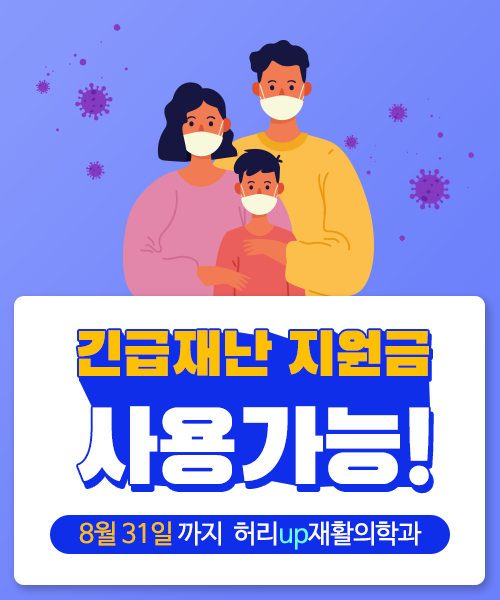
<style>
.page{position:relative;width:500px;height:600px;background:#ffffff}
.page>*{position:absolute;margin:0}
.t1{font:60px "BlackHanSans-Regular";letter-spacing:-0.025em;color:#ffc001}
.t2{font:102px "BlackHanSans-Regular";letter-spacing:-0.025em;color:#ffffff}
.t3{font:26px "NanumBarunGothic";letter-spacing:-0.025em;color:#ffc001}
.t4{font:26px "NanumBarunGothic";letter-spacing:-0.025em;color:#ffffff}
.t5{font:26px "NanumBarunGothic";letter-spacing:-0.025em;color:#64fcfe}
</style>
<div class="page">
<p class="t1" style="left:77px;top:330px;width:352px;height:46px">긴급재난 지원금</p>
<p class="t2" style="left:78px;top:406px;width:351px;height:80px">사용가능!</p>
<p class="t3" style="left:79px;top:521px;width:343px;height:29px">8월 31일 <span class="t4">까지  허리</span><span class="t5">up</span><span class="t4">재활의학과</span></p>
</div>
